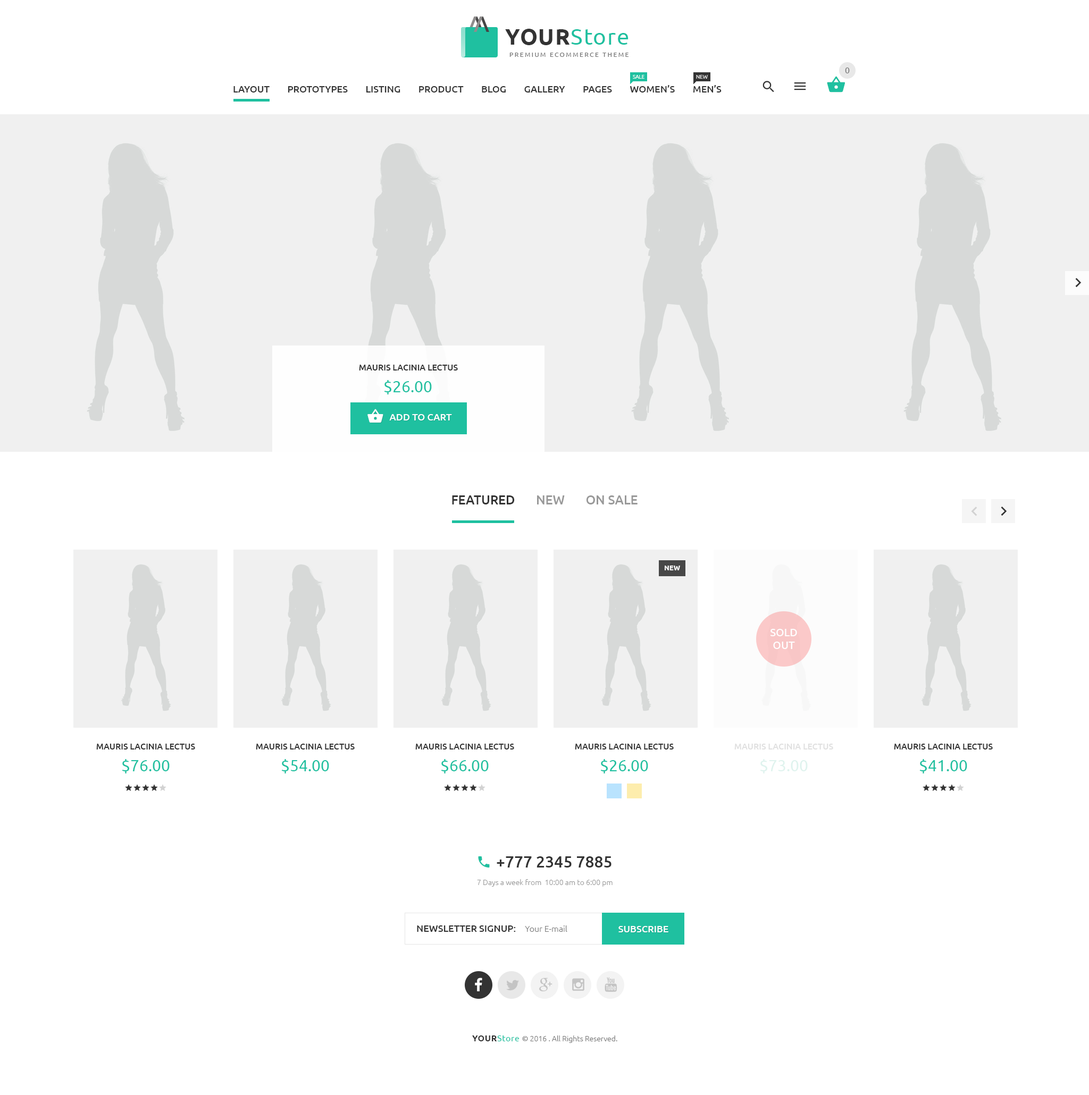
<style>
.page{position:relative;width:1089px;height:1095px;background:#ffffff}
.page>*{position:absolute;margin:0}
.t1{font:22.3px "Ubuntu";letter-spacing:0.04em;color:#1fc0a0}
.t2{font:22.3px "Ubuntu-Bold";letter-spacing:0.04em;color:#333333;text-transform:uppercase}
.t3{font:6.4px "Ubuntu";letter-spacing:0.2em;color:#777777;text-transform:uppercase}
.t4{font:5.3px "Ubuntu-Light";color:#ffffff;text-transform:uppercase}
.t5{font:8.5px "Ubuntu";color:#777777}
.t6{font:9.6px "Ubuntu-Medium";color:#333333;text-transform:uppercase}
.t7{font:8.5px "Ubuntu-Medium";color:#333333;text-transform:uppercase}
.t8{font:15.9px "Ubuntu";color:#1fc0a0;text-transform:uppercase}
.t9{font:9.6px "Ubuntu-Medium";color:#ffffff;text-transform:uppercase}
.t10{font:12.8px "Ubuntu-Medium";color:#999999;text-transform:uppercase}
.t11{font:12.8px "Ubuntu-Medium";color:#333333;text-transform:uppercase}
.t12{font:6.9px "Ubuntu-Bold";color:#ffffff;text-transform:uppercase}
.t13{font:10.6px/12.8px "Ubuntu-Medium";color:#ffffff;text-transform:uppercase}
.t14{font:8.5px "Ubuntu-Medium";color:#e0e0e0;text-transform:uppercase}
.t15{font:15.9px "Ubuntu";color:#dff3ee;text-transform:uppercase}
.t16{font:15.9px "Ubuntu-Medium";color:#333333;text-transform:uppercase}
.t17{font:7.4px "Ubuntu-Light";color:#999999}
.t18{font:8.5px "Ubuntu-Light";color:#777777}
.t19{font:7.4px "Ubuntu-Light";color:#777777}
.t20{font:8.5px "Ubuntu-Bold";letter-spacing:0.04em;color:#333333;text-transform:uppercase}
.t21{font:8.5px "Ubuntu";letter-spacing:0.04em;color:#1fc0a0}
</style>
<div class="page">
<p class="t1" style="left:505px;top:29px;width:123px;height:16px"><span class="t2">Your</span>Store</p>
<p class="t3" style="left:509px;top:53px;width:119px;height:4px">Premium ecommerce theme</p>
<p class="t4" style="left:633px;top:75px;width:11px;height:4px">sale</p>
<p class="t4" style="left:696px;top:75px;width:12px;height:4px">New</p>
<p class="t5" style="left:845px;top:68px;width:5px;height:5px">0</p>
<p class="t6" style="left:233px;top:85px;width:488px;height:8px">LAYOUT        Prototypes        LISTING        PRODUCT        BLOG        GALLERY        PAGES        WOMEN’s        MEN’s</p>
<p class="t7" style="left:359px;top:365px;width:99px;height:6px">Mauris lacinia lectus</p>
<p class="t8" style="left:384px;top:380px;width:48px;height:14px">$26.00</p>
<p class="t9" style="left:389px;top:414px;width:63px;height:7px">Add to cart</p>
<p class="t10" style="left:452px;top:495px;width:185px;height:10px"><span class="t11">FEATURED      </span> new       on Sale</p>
<p class="t12" style="left:665px;top:566px;width:15px;height:4px">new</p>
<p class="t13" style="left:770px;top:629px;width:27px;height:20px;text-align:center">sold<br>out</p>
<p class="t7" style="left:96px;top:744px;width:99px;height:6px">Mauris lacinia lectus</p>
<p class="t7" style="left:256px;top:744px;width:99px;height:6px">Mauris lacinia lectus</p>
<p class="t7" style="left:415px;top:744px;width:99px;height:6px">Mauris lacinia lectus</p>
<p class="t7" style="left:575px;top:744px;width:99px;height:6px">Mauris lacinia lectus</p>
<p class="t14" style="left:734px;top:744px;width:99px;height:6px">Mauris lacinia lectus</p>
<p class="t7" style="left:894px;top:744px;width:99px;height:6px">Mauris lacinia lectus</p>
<p class="t8" style="left:122px;top:759px;width:48px;height:15px">$76.00</p>
<p class="t8" style="left:281px;top:759px;width:48px;height:15px">$54.00</p>
<p class="t8" style="left:441px;top:759px;width:48px;height:15px">$66.00</p>
<p class="t8" style="left:600px;top:759px;width:48px;height:15px">$26.00</p>
<p class="t15" style="left:760px;top:759px;width:48px;height:15px">$73.00</p>
<p class="t8" style="left:919px;top:759px;width:48px;height:15px">$41.00</p>
<p class="t16" style="left:497px;top:856px;width:114px;height:12px">+777 2345 7885</p>
<p class="t17" style="left:477px;top:879px;width:135px;height:8px">7 Days a week from  10:00 am to 6:00 pm</p>
<p class="t6" style="left:417px;top:926px;width:150px;height:6px">NEWSLETTER SIGNUP:    <span class="t18">Your E-mail</span></p>
<p class="t9" style="left:618px;top:926px;width:50px;height:6px">sUBSCRIBE</p>
<p class="t19" style="left:472px;top:1036px;width:145px;height:7px"><span class="t20">Your</span><span class="t21">Store </span>© 2016 . All Rights Reserved.</p>
</div>
